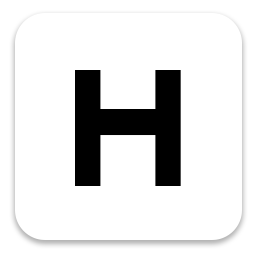
<style>
.page{position:relative;width:256px;height:256px;background:#ffffff}
.page>*{position:absolute;margin:0}
.t1{font:150px "TYPOGRAPHPRO-ExtraBold";color:#000000}
</style>
<div class="page">
<p class="t1" style="left:75px;top:70px;width:106px;height:116px">H</p>
</div>
